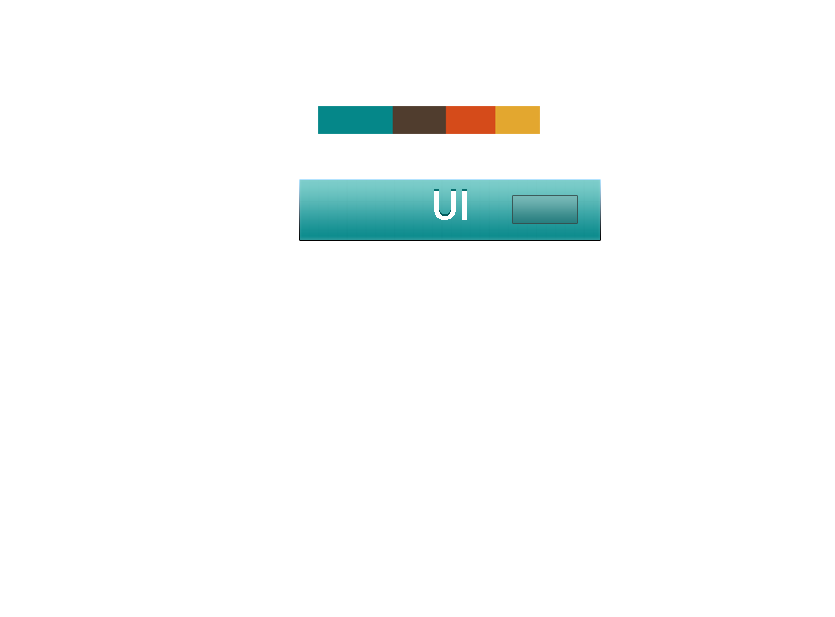
<style>
.page{position:relative;width:835px;height:617px;background:#ffffff}
.page>*{position:absolute;margin:0}
.t1{font:41.7px "MyriadPro-Semibold";color:#ffffff;text-transform:uppercase}
</style>
<div class="page">
<p class="t1" style="left:434px;top:191px;width:33px;height:29px">UI</p>
</div>
